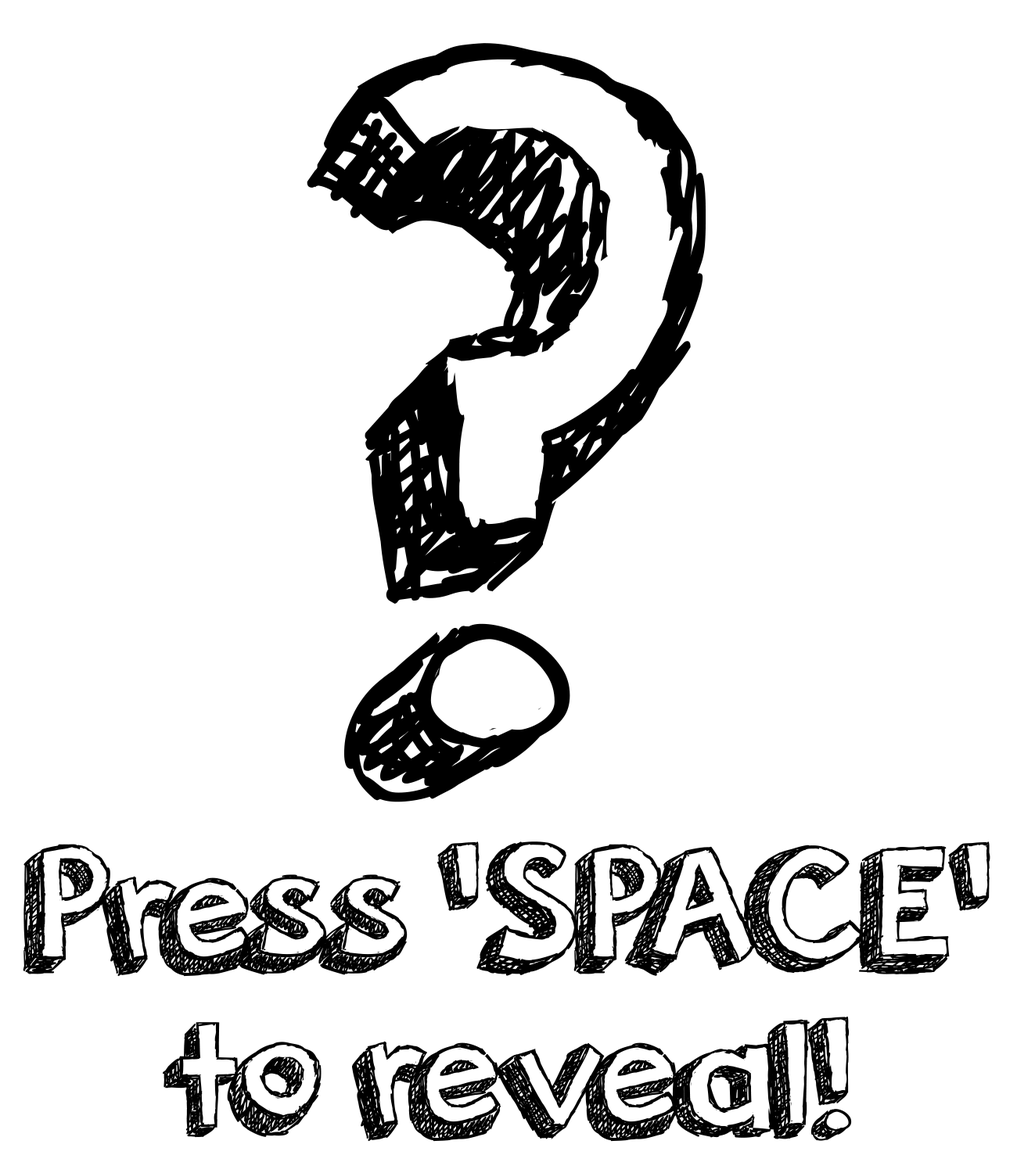
<style>
.page{position:relative;width:1017px;height:1173px;background:#ffffff}
.page>*{position:absolute;margin:0}
.t1{font:1013.5px "orangejuice";color:#000000}
.t2{font:179.9px "orangejuice";color:#000000}
</style>
<div class="page">
<p class="t1" style="left:307px;top:43px;width:399px;height:759px">?</p>
<p class="t2" style="left:23px;top:841px;width:967px;height:136px">Press 'SPACE'</p>
<p class="t2" style="left:163px;top:1016px;width:689px;height:126px">to reveal!</p>
</div>
